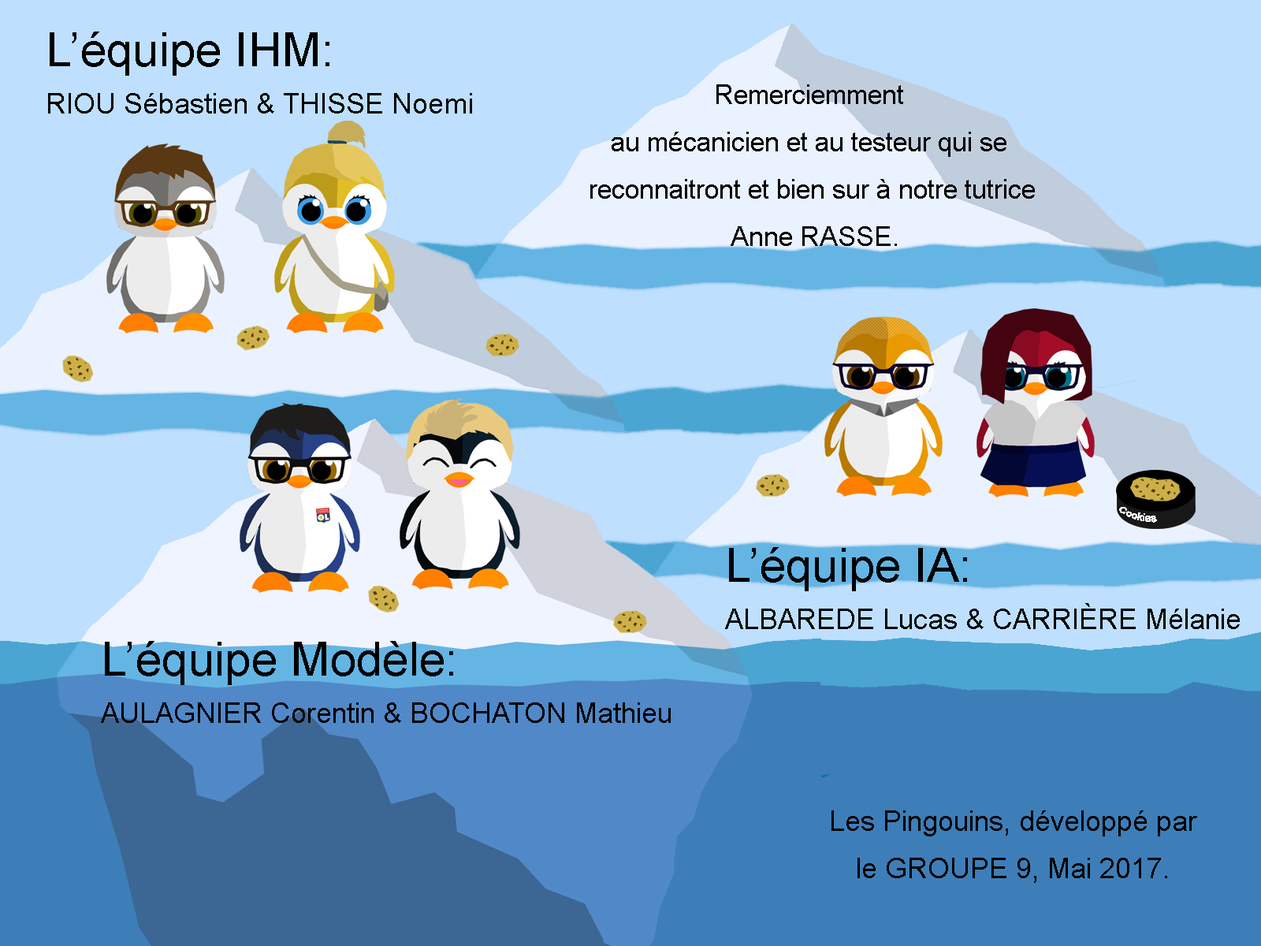
<style>
.page{position:relative;width:1261px;height:946px;background:#bedffe}
.page>*{position:absolute;margin:0}
.t1{font:28.4px/47.3px "ArialMT";color:#000000}
.t2{font:47.3px/47.3px "ArialMT";color:#000000}
.t3{font:26.8px/47.3px "ArialMT";color:#000000}
</style>
<div class="page">
<p class="t1" style="left:48px;top:32px;width:424px;height:81px"><span class="t2">L’équipe IHM:<br></span>RIOU Sébastien &amp; THISSE Noemi</p>
<p class="t3" style="left:590px;top:84px;width:445px;height:162px;text-align:center">Remerciemment <br>au mécanicien et au testeur qui se <br>reconnaitront et bien sur à notre tutrice<br> Anne RASSE.</p>
<p class="t1" style="left:725px;top:547px;width:515px;height:82px"><span class="t2">L’équipe IA:<br></span>ALBAREDE Lucas &amp; CARRIÈRE Mélanie</p>
<p class="t1" style="left:101px;top:641px;width:570px;height:82px"><span class="t2">L’équipe Modèle:<br></span>AULAGNIER Corentin &amp; BOCHATON Mathieu</p>
<p class="t1" style="left:831px;top:810px;width:366px;height:73px;text-align:center">Les Pingouins, développé par<br>le GROUPE 9, Mai 2017.</p>
</div>
